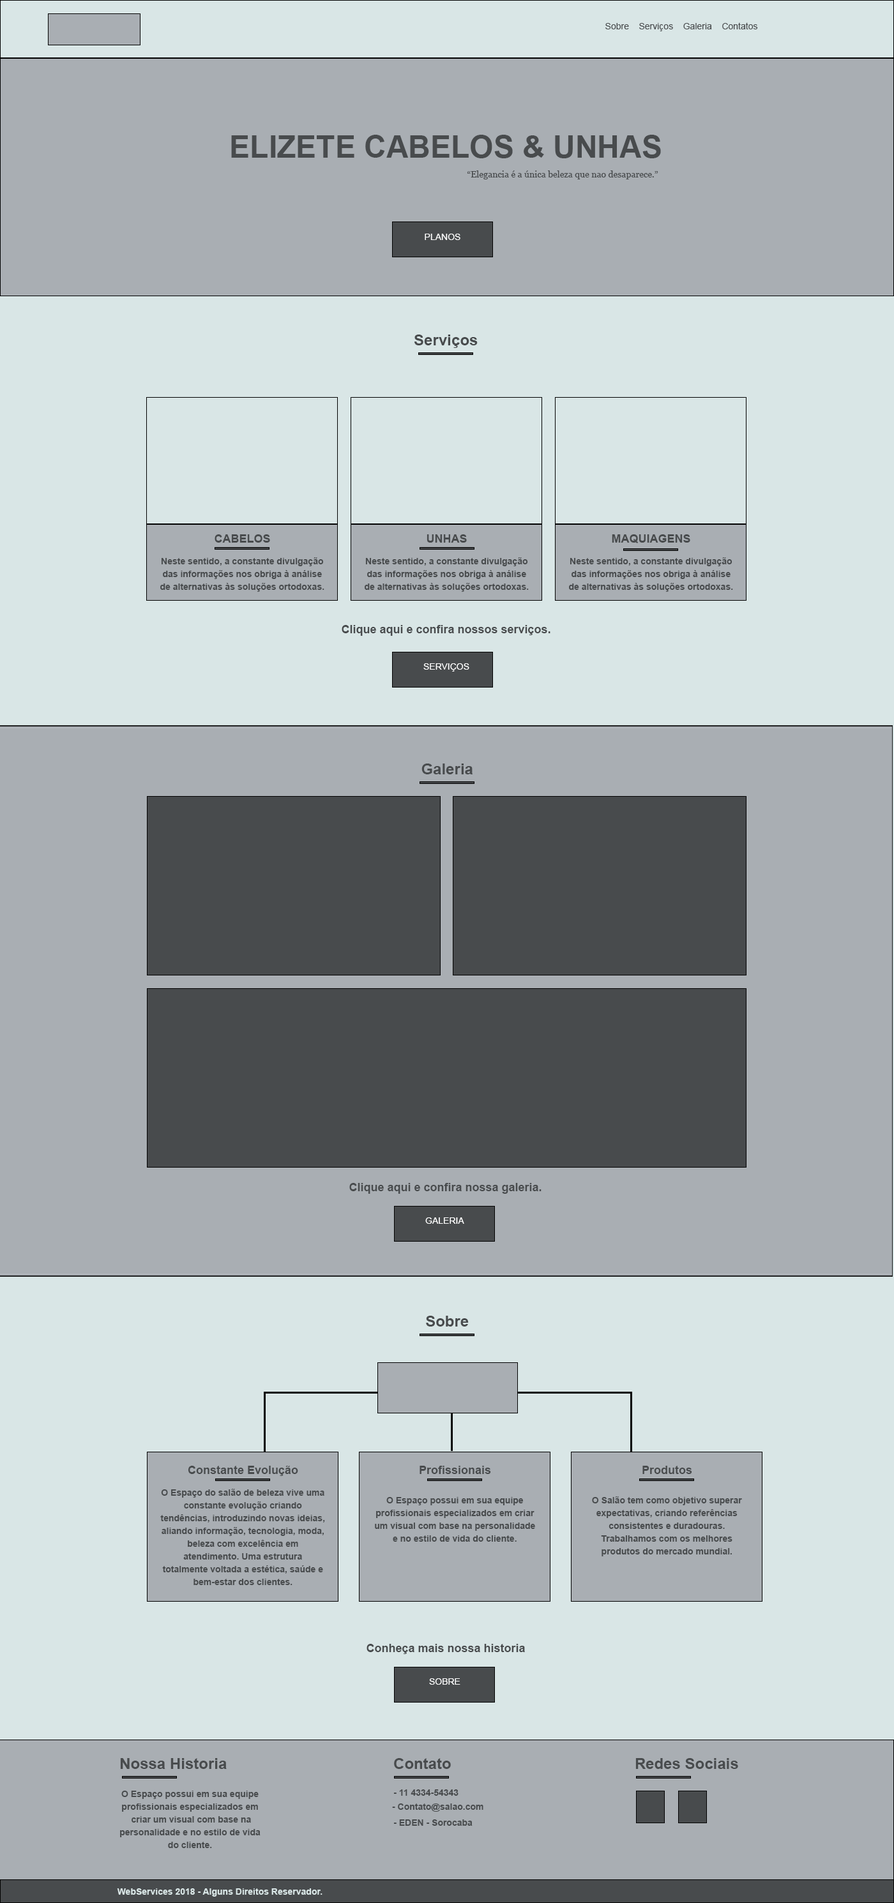
<style>
.page{position:relative;width:894px;height:1903px;background:#d9e6e6}
.page>*{position:absolute;margin:0}
.t1{font:8.9px "ArialMT";color:#484b4d}
.t2{font:30.6px "Arial-BoldMT";color:#484b4d;text-transform:uppercase}
.t3{font:8.9px "Georgia";color:#484b4d}
.t4{font:8.9px "ArialMT";color:#ffffff;text-transform:uppercase}
.t5{font:15.2px "Arial-BoldMT";color:#484b4d}
.t6{font:11.5px "Arial-BoldMT";color:#484b4d}
.t7{font:8.9px/12.8px "Arial-BoldMT";color:#484b4d}
.t8{font:9px "ArialMT";color:#ffffff;text-transform:uppercase}
.t9{font:8.9px/12.7px "Arial-BoldMT";color:#484b4d}
.t10{font:9px "Arial-BoldMT";color:#484b4d}
.t11{font:8.9px "Arial-BoldMT";color:#d9e6e6}
</style>
<div class="page">
<p class="t1" style="left:605px;top:22px;width:153px;height:9px">Sobre    Serviços    Galeria    Contatos</p>
<p class="t2" style="left:231px;top:135px;width:430px;height:23px">Elizete Cabelos &amp; Unhas</p>
<p class="t3" style="left:467px;top:170px;width:191px;height:9px">“Elegancia é a única beleza que nao desaparece.”</p>
<p class="t4" style="left:425px;top:234px;width:35px;height:6px">Planos</p>
<p class="t5" style="left:414px;top:335px;width:64px;height:13px">Serviços</p>
<p class="t6" style="left:215px;top:534px;width:55px;height:9px">CABELOS</p>
<p class="t6" style="left:427px;top:534px;width:40px;height:9px">UNHAS</p>
<p class="t6" style="left:612px;top:534px;width:78px;height:9px">MAQUIAGENS</p>
<p class="t7" style="left:160px;top:557px;width:164px;height:35px;text-align:center">Neste sentido, a constante divulgação das informações nos obriga à análise de alternativas às soluções ortodoxas.</p>
<p class="t7" style="left:365px;top:557px;width:164px;height:35px;text-align:center">Neste sentido, a constante divulgação das informações nos obriga à análise de alternativas às soluções ortodoxas.</p>
<p class="t7" style="left:569px;top:557px;width:164px;height:35px;text-align:center">Neste sentido, a constante divulgação das informações nos obriga à análise de alternativas às soluções ortodoxas.</p>
<p class="t6" style="left:342px;top:625px;width:208px;height:11px">Clique aqui e confira nossos serviços.</p>
<p class="t4" style="left:423px;top:663px;width:46px;height:9px">Serviços</p>
<p class="t5" style="left:421px;top:764px;width:52px;height:10px">Galeria</p>
<p class="t6" style="left:349px;top:1183px;width:192px;height:11px">Clique aqui e confira nossa galeria.</p>
<p class="t4" style="left:425px;top:1218px;width:39px;height:6px">Galeria</p>
<p class="t5" style="left:426px;top:1316px;width:43px;height:11px">Sobre</p>
<p class="t6" style="left:188px;top:1466px;width:110px;height:10px">Constante Evolução</p>
<p class="t6" style="left:419px;top:1466px;width:72px;height:8px">Profissionais</p>
<p class="t6" style="left:642px;top:1466px;width:50px;height:8px">Produtos</p>
<p class="t7" style="left:160px;top:1489px;width:165px;height:96px;text-align:center">O Espaço do salão de beleza vive uma constante evolução criando tendências, introduzindo novas ideias, aliando informação, tecnologia, moda, beleza com excelência em atendimento. Uma estrutura totalmente voltada a estética, saúde e bem-estar dos clientes.</p>
<p class="t7" style="left:375px;top:1497px;width:160px;height:45px;text-align:center">O Espaço possui em sua equipe profissionais especializados em criar um visual com base na personalidade e no estilo de vida do cliente.</p>
<p class="t7" style="left:592px;top:1497px;width:150px;height:60px;text-align:center">O Salão tem como objetivo superar expectativas, criando referências consistentes e duradouras. Trabalhamos com os melhores produtos do mercado mundial.</p>
<p class="t6" style="left:366px;top:1644px;width:159px;height:10px">Conheça mais nossa historia</p>
<p class="t8" style="left:429px;top:1679px;width:31px;height:6px">Sobre</p>
<p class="t5" style="left:120px;top:1758px;width:107px;height:11px">Nossa Historia</p>
<p class="t5" style="left:394px;top:1758px;width:57px;height:11px">Contato</p>
<p class="t5" style="left:635px;top:1758px;width:103px;height:11px">Redes Sociais</p>
<p class="t9" style="left:120px;top:1791px;width:141px;height:57px;text-align:center">O Espaço possui em sua equipe profissionais especializados em<br> criar um visual com base na personalidade e no estilo de vida <br>do cliente.</p>
<p class="t10" style="left:393px;top:1790px;width:65px;height:6px">- 11 4334-54343</p>
<p class="t10" style="left:392px;top:1804px;width:91px;height:8px">- Contato@salao.com</p>
<p class="t10" style="left:393px;top:1820px;width:79px;height:6px">- EDEN - Sorocaba</p>
<p class="t11" style="left:117px;top:1889px;width:205px;height:8px">WebServices 2018 - Alguns Direitos Reservador.</p>
</div>
